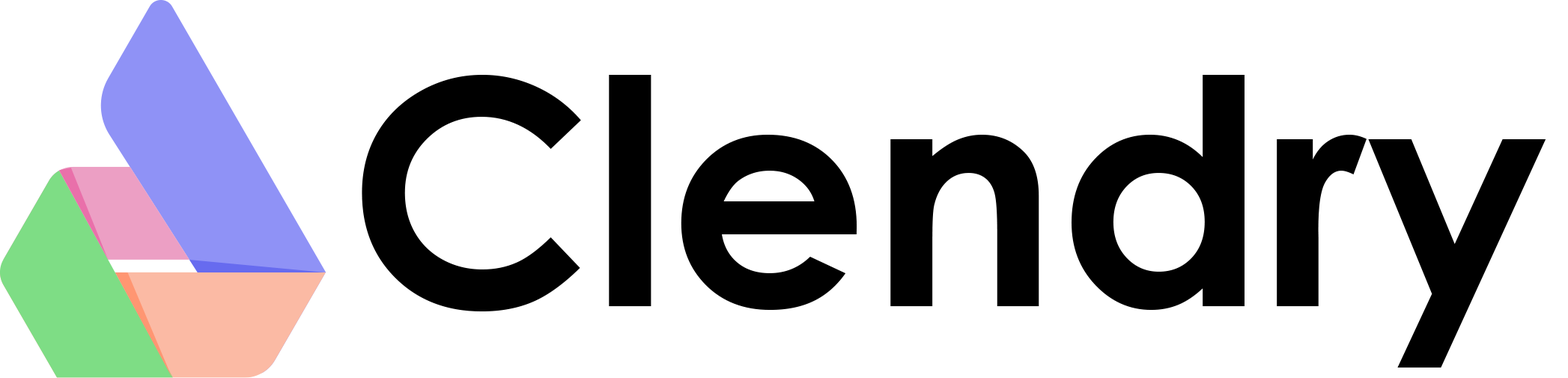
<style>
.page{position:relative;width:1568px;height:378px;background:#ffffff}
.page>*{position:absolute;margin:0}
.t1{font:314.5px "CenturyGothic-Bold";color:#000000}
</style>
<div class="page">
<p class="t1" style="left:362px;top:75px;width:1184px;height:293px">Clendry</p>
</div>
